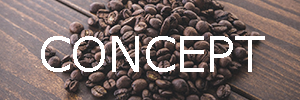
<style>
.page{position:relative;width:300px;height:100px}
.page>*{position:absolute;margin:0}
.t1{font:48px "Meiryo";color:#ffffff}
</style>
<div class="page">
<p class="t1" style="left:41px;top:36px;width:224px;height:36px">CONCEPT</p>
</div>
